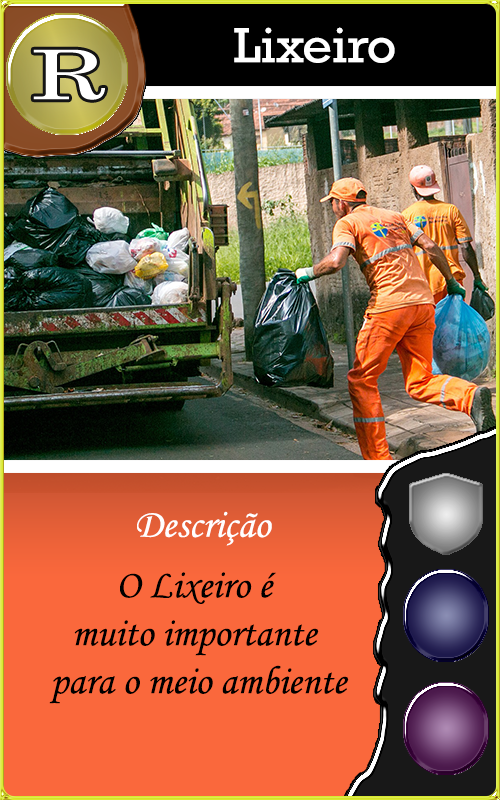
<style>
.page{position:relative;width:500px;height:800px}
.page>*{position:absolute;margin:0}
.t1{font:50px "Rockwell";color:#ffffff;scale:1.04 1}
.t2{font:40px "MonotypeCorsiva";color:#fffefe}
.t3{font:40px "MonotypeCorsiva";color:#000000}
</style>
<div class="page">
<p class="t1" style="left:234px;top:27px;width:161px;height:36px">Lixeiro</p>
<p class="t2" style="left:137px;top:511px;width:135px;height:35px">Descrição</p>
<p class="t3" style="left:49px;top:572px;width:300px;height:132px;text-align:center">O Lixeiro é <br>muito importante <br>para o meio ambiente</p>
</div>
